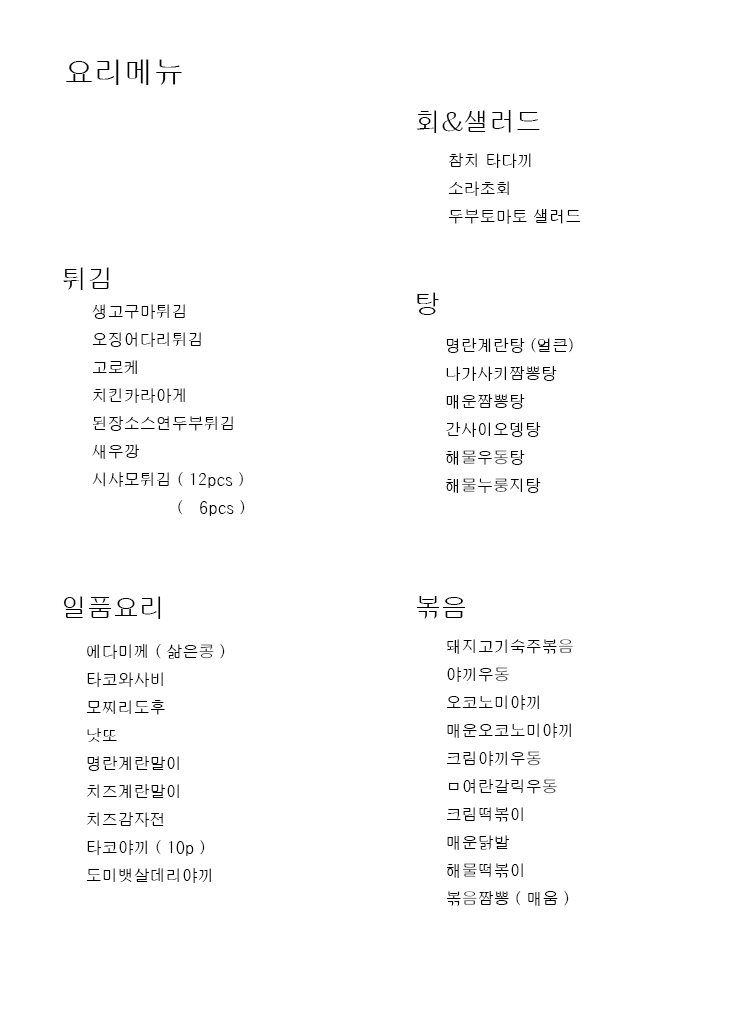
<style>
.page{position:relative;width:729px;height:1032px;background:#ffffff}
.page>*{position:absolute;margin:0}
.t1{font:30px "H2gprM";color:#000000}
.t2{font:26px "H2gprM";color:#000000}
.t3{font:16px "H2gprM";color:#000000}
</style>
<div class="page">
<p class="t1" style="left:66px;top:59px;width:116px;height:26px">요리메뉴</p>
<p class="t2" style="left:417px;top:110px;width:123px;height:23px">회&amp;샐러드</p>
<p class="t3" style="left:448px;top:153px;width:133px;height:71px">참치 타다끼<br>소라초회<br>두부토마토 샐러드</p>
<p class="t2" style="left:63px;top:267px;width:46px;height:23px">튀김</p>
<p class="t2" style="left:417px;top:292px;width:22px;height:23px">탕</p>
<p class="t3" style="left:92px;top:304px;width:153px;height:212px">생고구마튀김<br>오징어다리튀김<br>고로케<br>치킨카라아게<br>된장소스연두부튀김<br>새우깡<br>시샤모튀김 ( 12pcs )<br>                (   6pcs )</p>
<p class="t3" style="left:446px;top:338px;width:127px;height:155px">명란계란탕 (얼큰)<br>나가사키짬뽕탕<br>매운짬뽕탕<br>간사이오뎅탕<br>해물우동탕<br>해물누룽지탕</p>
<p class="t2" style="left:63px;top:596px;width:98px;height:23px">일품요리</p>
<p class="t2" style="left:416px;top:596px;width:50px;height:23px">볶음</p>
<p class="t3" style="left:446px;top:639px;width:127px;height:267px">돼지고기숙주볶음<br>야끼우동<br>오코노미야끼<br>매운오코노미야끼<br>크림야끼우동<br>ㅁ여란갈릭우동<br>크림떡볶이<br>매운닭발<br>해물떡볶이<br>볶음짬뽕 ( 매움 )</p>
<p class="t3" style="left:86px;top:644px;width:139px;height:239px">에다미께 ( 삶은콩 )<br>타코와사비<br>모찌리도후<br>낫또<br>명란계란말이<br>치즈계란말이<br>치즈감자전<br>타코야끼 ( 10p )<br>도미뱃살데리야끼</p>
</div>
